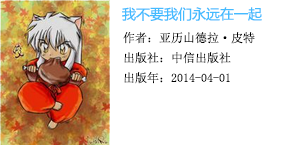
<style>
.page{position:relative;width:300px;height:145px;background:#ffffff}
.page>*{position:absolute;margin:0}
.t1{font:14px "MicrosoftYaHei";color:#44bbff}
.t2{font:12px/20px "NSimSun";color:#000000}
</style>
<div class="page">
<p class="t1" style="left:122px;top:7px;width:140px;height:14px">我不要我们永远在一起</p>
<p class="t2" style="left:123px;top:32px;width:132px;height:52px">作者：亚历山德拉·皮特<br>出版社：中信出版社<br>出版年：2014-04-01</p>
</div>
